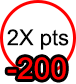
<style>
.page{position:relative;width:76px;height:84px;background:#ffffff}
.page>*{position:absolute;margin:0}
.t1{font:22px "ArialMT";color:#030303}
.t2{font:30px "ArialMT";color:#ff0000}
</style>
<div class="page">
<p class="t1" style="left:7px;top:29px;width:62px;height:21px">2X pts</p>
<p class="t2" style="left:7px;top:57px;width:59px;height:23px">-200</p>
</div>
